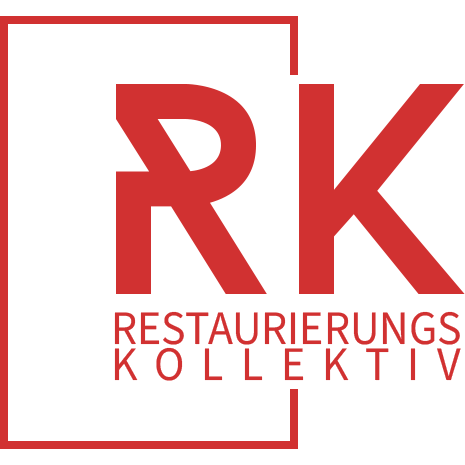
<style>
.page{position:relative;width:465px;height:465px;background:#ffffff}
.page>*{position:absolute;margin:0}
.t1{font:300px "BaronNeue";color:#d13131}
.t2{font:48px "SourceSans3Roman-Regular";color:#d13131;scale:0.95 1}
.t3{font:48px "SourceSans3Roman-Regular";letter-spacing:0.38em;color:#d13131;scale:0.95 1}
</style>
<div class="page">
<p class="t1" style="left:116px;top:84px;width:349px;height:210px">RK</p>
<p class="t2" style="left:114px;top:311px;width:346px;height:34px">RESTAURIERUNGS</p>
<p class="t3" style="left:114px;top:347px;width:347px;height:34px">KOLLEKTIV</p>
</div>
